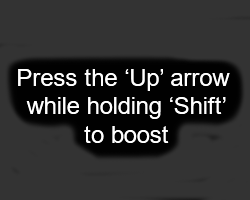
<style>
.page{position:relative;width:250px;height:200px;background:#333333}
.page>*{position:absolute;margin:0}
.t1{font:24px "ArialMT";color:#ffffff}
</style>
<div class="page">
<p class="t1" style="left:18px;top:69px;width:212px;height:74px;text-align:center">Press the ‘Up’ arrow <br>while holding ‘Shift’<br>to boost</p>
</div>
